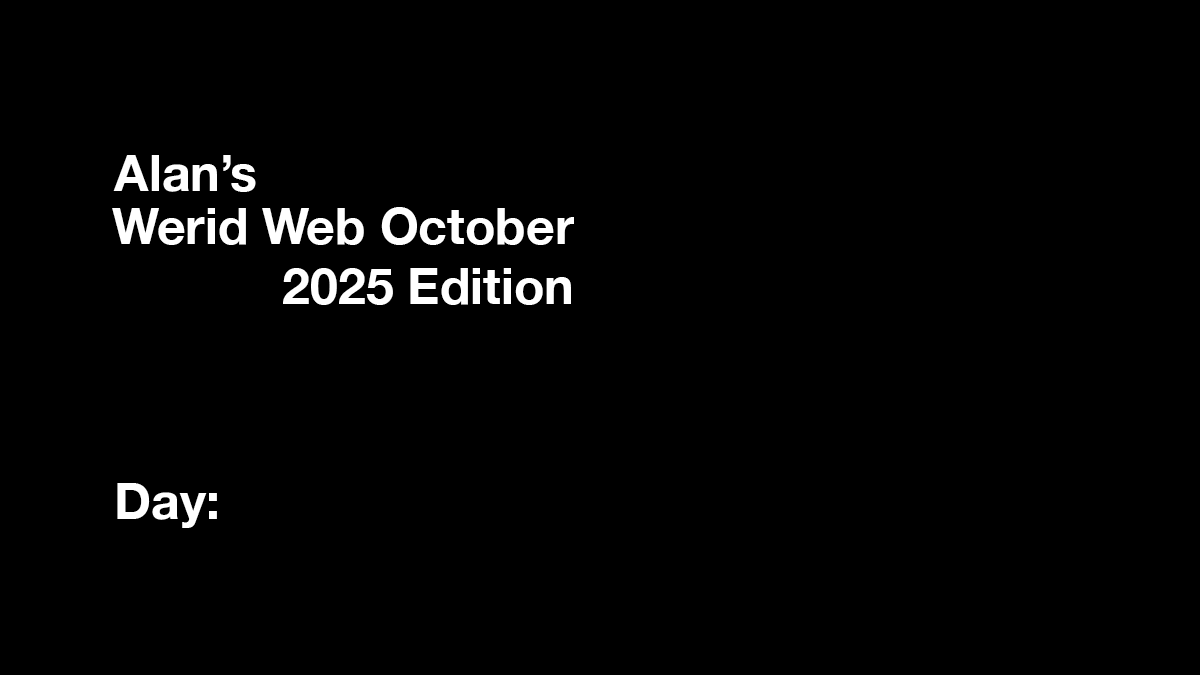
<style>
.page{position:relative;width:1200px;height:675px;background:#000000}
.page>*{position:absolute;margin:0}
.t1{font:50px "HelveticaNeue-Bold";color:#ffffff}
</style>
<div class="page">
<p class="t1" style="left:113px;top:155px;width:143px;height:37px">Alan’s</p>
<p class="t1" style="left:112px;top:207px;width:462px;height:98px;text-align:right">Werid Web October<br>2025 Edition</p>
<p class="t1" style="left:117px;top:483px;width:100px;height:45px">Day:</p>
</div>
